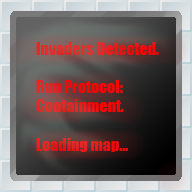
<style>
.page{position:relative;width:192px;height:192px}
.page>*{position:absolute;margin:0}
.t1{font:16px "Impact";color:#ea1c1a}
</style>
<div class="page">
<p class="t1" style="left:36px;top:42px;width:123px;height:110px">Invaders Detected.<br><br>Run Protocol:<br>Containment.<br><br>Loading map...</p>
</div>
